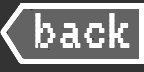
<style>
.page{position:relative;width:144px;height:72px;background:#636363}
.page>*{position:absolute;margin:0}
.t1{font:61.5px "VT323-Regular";color:#ffffff}
</style>
<div class="page">
<p class="t1" style="left:35px;top:13px;width:95px;height:35px">back</p>
</div>
